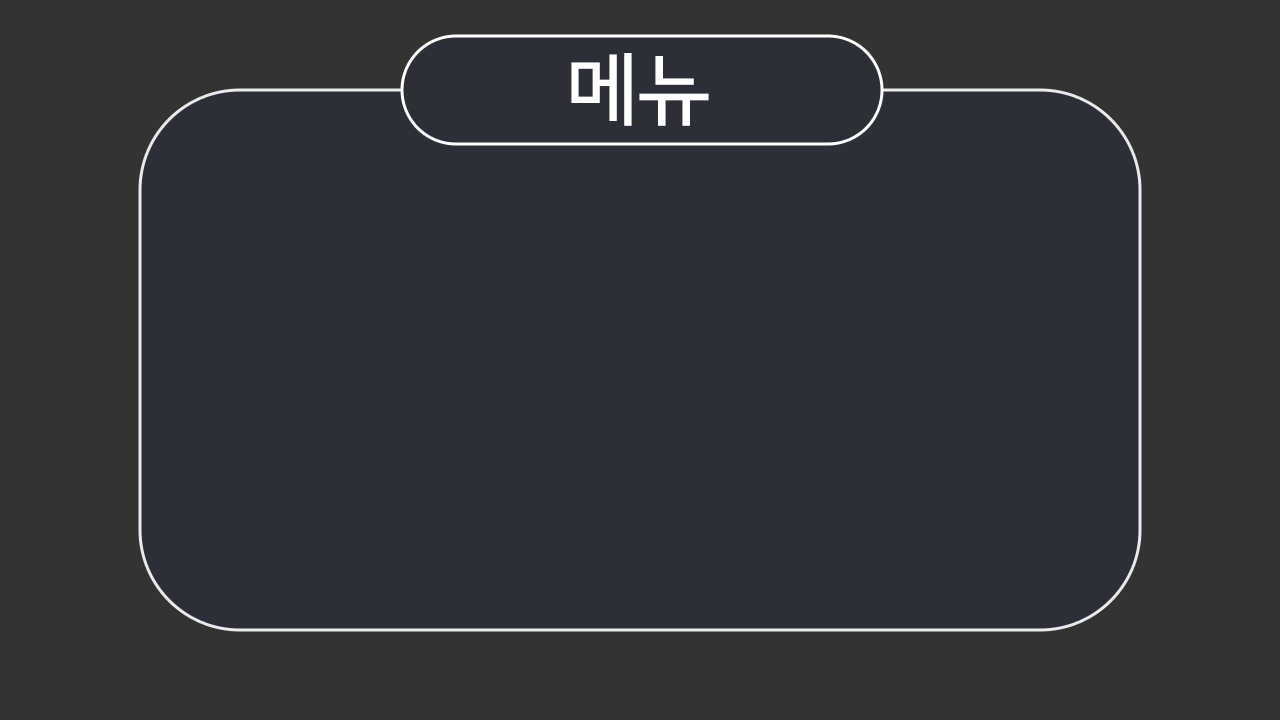
<style>
.page{position:relative;width:1280px;height:720px;background:#2d2f38}
.page>*{position:absolute;margin:0}
.t1{font:80px "SeoulNamsanB";letter-spacing:-0.02em;color:#ffffff}
</style>
<div class="page">
<p class="t1" style="left:571px;top:53px;width:138px;height:73px">메뉴</p>
</div>
